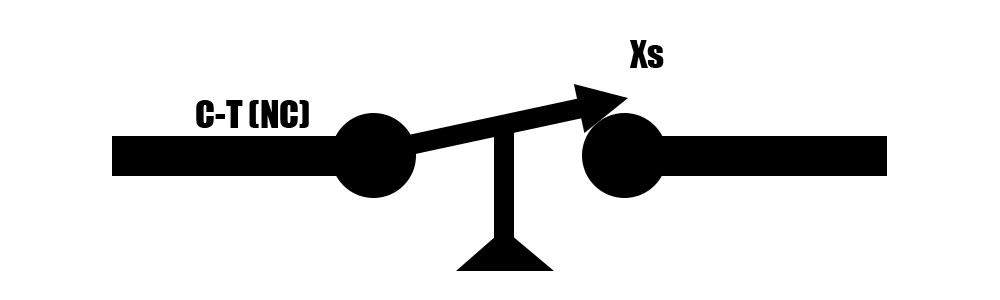
<style>
.page{position:relative;width:1000px;height:300px;background:#ffffff}
.page>*{position:absolute;margin:0}
.t1{font:36px "Impact";color:#000000}
</style>
<div class="page">
<p class="t1" style="left:630px;top:40px;width:34px;height:28px">Xs</p>
<p class="t1" style="left:196px;top:100px;width:113px;height:28px">C-T (NC)</p>
</div>
